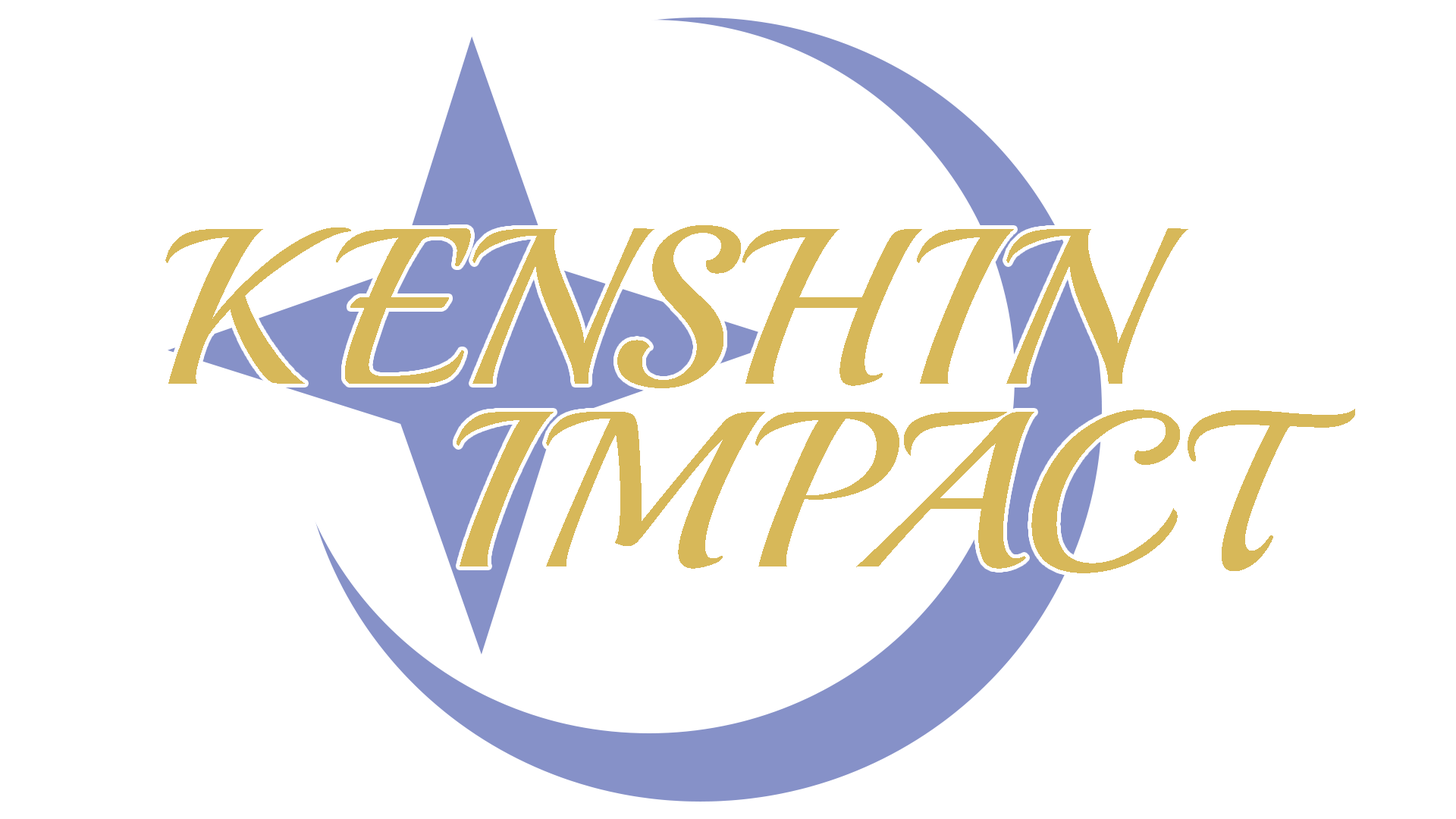
<style>
.page{position:relative;width:1456px;height:819px;background:#ffffff}
.page>*{position:absolute;margin:0}
.t1{font:221.2px "Playball-Regular";color:#d7b859}
</style>
<div class="page">
<p class="t1" style="left:165px;top:225px;width:1023px;height:163px">KENSHIN</p>
<p class="t1" style="left:457px;top:409px;width:898px;height:164px">IMPACT</p>
</div>
